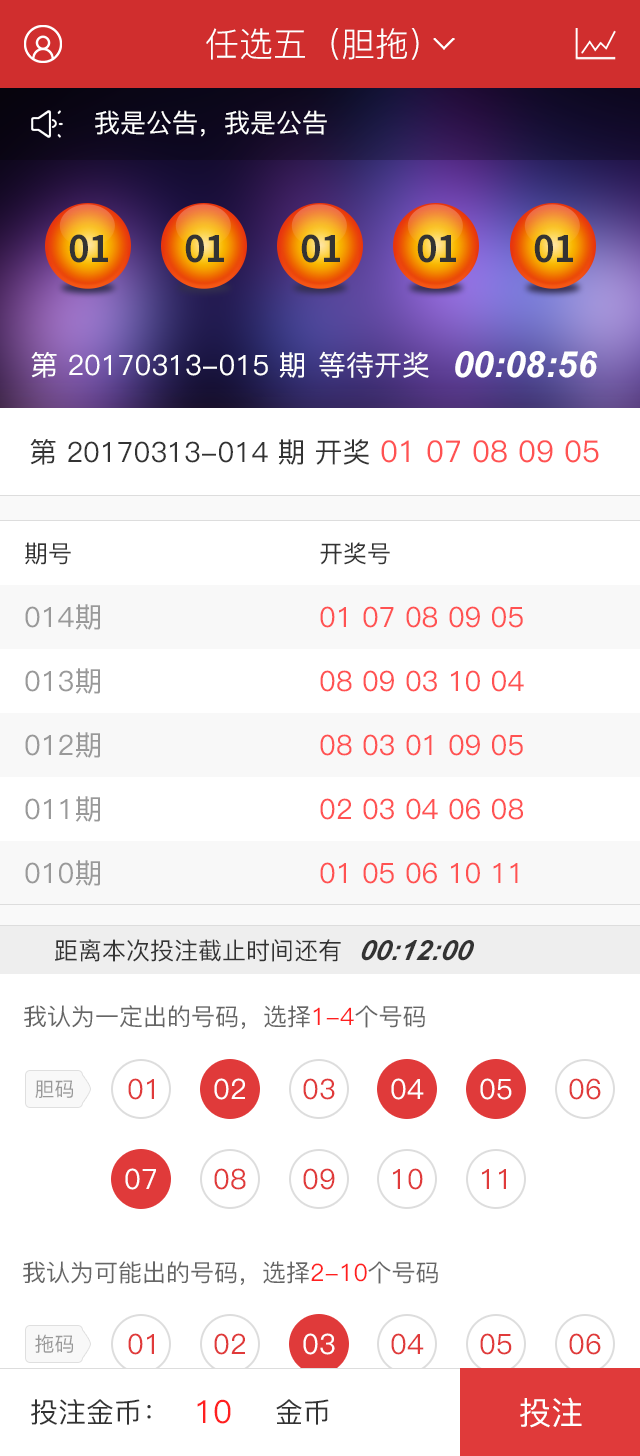
<style>
.page{position:relative;width:640px;height:1456px;background:#ffffff}
.page>*{position:absolute;margin:0}
.t1{font:34px "PingFang-SC-Regular";color:#ffffff}
.t2{font:26px "PingFang-SC-Medium";color:#ffffff}
.t3{font:36.4px "SourceHanSansCN-Bold";color:#333333}
.t4{font:28px "PingFang-SC-Medium";color:#ffffff}
.t5{font:36px "Arial-BoldItalicMT";color:#ffffff}
.t6{font:28px "PingFang-SC-Medium";color:#333333}
.t7{font:30px "PingFang-SC-Medium";color:#ff5252}
.t8{font:24px "PingFang-SC-Medium";color:#333333}
.t9{font:28px "PingFang-SC-Medium";color:#999999}
.t10{font:28px "PingFang-SC-Medium";color:#ff5252}
.t11{font:28px "Arial-BoldItalicMT";color:#333333;font-style:italic}
.t12{font:24px "PingFang-SC-Medium";color:#666666}
.t13{font:24px "PingFang-SC-Medium";color:#ff1f1f}
.t14{font:20px "PingFang-SC-Medium";color:#999999}
.t15{font:28px "PingFang-SC-Medium";color:#e03a3a}
.t16{font:28px "PingFang-SC-Medium";color:#fffefe}
.t17{font:32px "PingFang-SC-Medium";color:#ffffff}
.t18{font:32px "PingFang-SC-Medium";color:#ff1f1f}
</style>
<div class="page">
<p class="t1" style="left:206px;top:28px;width:213px;height:32px">任选五（胆拖）</p>
<p class="t2" style="left:95px;top:110px;width:232px;height:27px">我是公告，我是公告</p>
<p class="t3" style="left:69px;top:234px;width:39px;height:29px">01</p>
<p class="t3" style="left:185px;top:234px;width:39px;height:29px">01</p>
<p class="t3" style="left:301px;top:234px;width:39px;height:29px">01</p>
<p class="t3" style="left:417px;top:234px;width:39px;height:29px">01</p>
<p class="t3" style="left:534px;top:234px;width:39px;height:29px">01</p>
<p class="t4" style="left:31px;top:351px;width:398px;height:27px">第 20170313-015 期 等待开奖</p>
<p class="t5" style="left:455px;top:351px;width:143px;height:27px">00:08:56</p>
<p class="t6" style="left:30px;top:439px;width:569px;height:26px">第 20170313-014 期 开奖 <span class="t7">01 07 08 09 05</span></p>
<p class="t8" style="left:25px;top:542px;width:46px;height:23px">期号</p>
<p class="t8" style="left:320px;top:542px;width:70px;height:23px">开奖号</p>
<p class="t9" style="left:25px;top:604px;width:75px;height:26px">014期</p>
<p class="t10" style="left:320px;top:606px;width:203px;height:22px">01 07 08 09 05</p>
<p class="t9" style="left:25px;top:668px;width:75px;height:26px">013期</p>
<p class="t10" style="left:320px;top:670px;width:204px;height:22px">08 09 03 10 04</p>
<p class="t9" style="left:25px;top:732px;width:75px;height:26px">012期</p>
<p class="t10" style="left:320px;top:734px;width:203px;height:22px">08 03 01 09 05</p>
<p class="t9" style="left:25px;top:796px;width:75px;height:26px">011期</p>
<p class="t10" style="left:320px;top:798px;width:203px;height:22px">02 03 04 06 08</p>
<p class="t9" style="left:25px;top:860px;width:75px;height:26px">010期</p>
<p class="t10" style="left:320px;top:862px;width:198px;height:22px">01 05 06 10 11</p>
<p class="t8" style="left:55px;top:939px;width:286px;height:23px">距离本次投注截止时间还有</p>
<p class="t11" style="left:361px;top:940px;width:113px;height:21px">00:12:00</p>
<p class="t12" style="left:24px;top:1005px;width:401px;height:24px">我认为一定出的号码，选择<span class="t13">1-4</span>个号码</p>
<p class="t14" style="left:35px;top:1080px;width:38px;height:18px">胆码</p>
<p class="t15" style="left:128px;top:1078px;width:26px;height:22px">01</p>
<p class="t16" style="left:214px;top:1078px;width:31px;height:22px">02</p>
<p class="t15" style="left:303px;top:1078px;width:32px;height:22px">03</p>
<p class="t4" style="left:391px;top:1078px;width:33px;height:22px">04</p>
<p class="t4" style="left:480px;top:1078px;width:32px;height:22px">05</p>
<p class="t15" style="left:569px;top:1078px;width:32px;height:22px">06</p>
<p class="t4" style="left:125px;top:1168px;width:31px;height:22px">07</p>
<p class="t15" style="left:214px;top:1168px;width:32px;height:22px">08</p>
<p class="t15" style="left:303px;top:1168px;width:32px;height:22px">09</p>
<p class="t15" style="left:393px;top:1168px;width:30px;height:22px">10</p>
<p class="t15" style="left:482px;top:1169px;width:24px;height:20px">11</p>
<p class="t12" style="left:23px;top:1261px;width:415px;height:24px">我认为可能出的号码，选择<span class="t13">2-10</span>个号码</p>
<p class="t14" style="left:35px;top:1334px;width:38px;height:19px">拖码</p>
<p class="t15" style="left:128px;top:1333px;width:26px;height:22px">01</p>
<p class="t15" style="left:214px;top:1333px;width:31px;height:22px">02</p>
<p class="t4" style="left:303px;top:1333px;width:32px;height:22px">03</p>
<p class="t15" style="left:391px;top:1333px;width:33px;height:22px">04</p>
<p class="t15" style="left:480px;top:1333px;width:32px;height:22px">05</p>
<p class="t15" style="left:569px;top:1333px;width:32px;height:22px">06</p>
<p class="t17" style="left:520px;top:1397px;width:62px;height:31px">投注</p>
<p class="t6" style="left:31px;top:1399px;width:120px;height:26px">投注金币：</p>
<p class="t18" style="left:197px;top:1399px;width:34px;height:25px">10</p>
<p class="t6" style="left:276px;top:1399px;width:53px;height:26px">金币</p>
</div>
